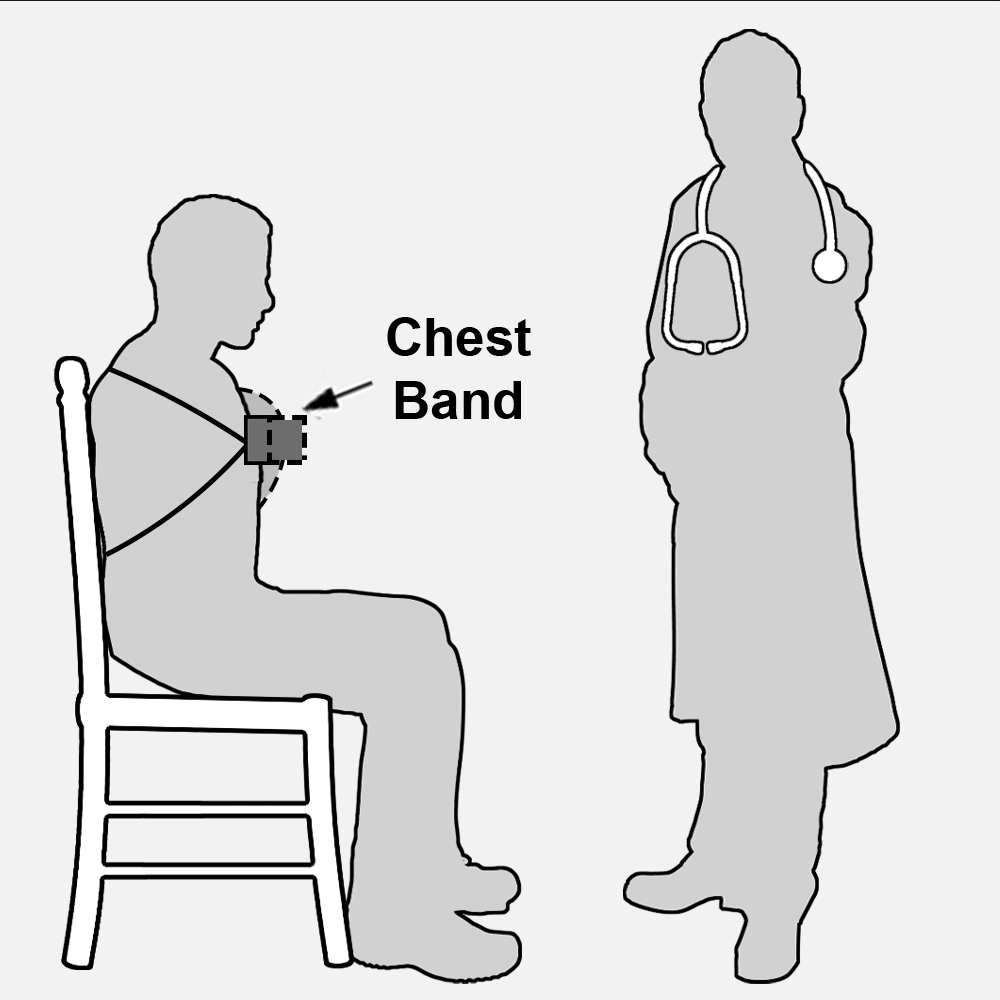
<style>
.page{position:relative;width:1000px;height:1000px;background:#f2f2f2}
.page>*{position:absolute;margin:0}
.t1{font:52.8px "Arial-BoldMT";color:#000000}
</style>
<div class="page">
<p class="t1" style="left:387px;top:316px;width:144px;height:102px;text-align:center">Chest<br>Band</p>
</div>
